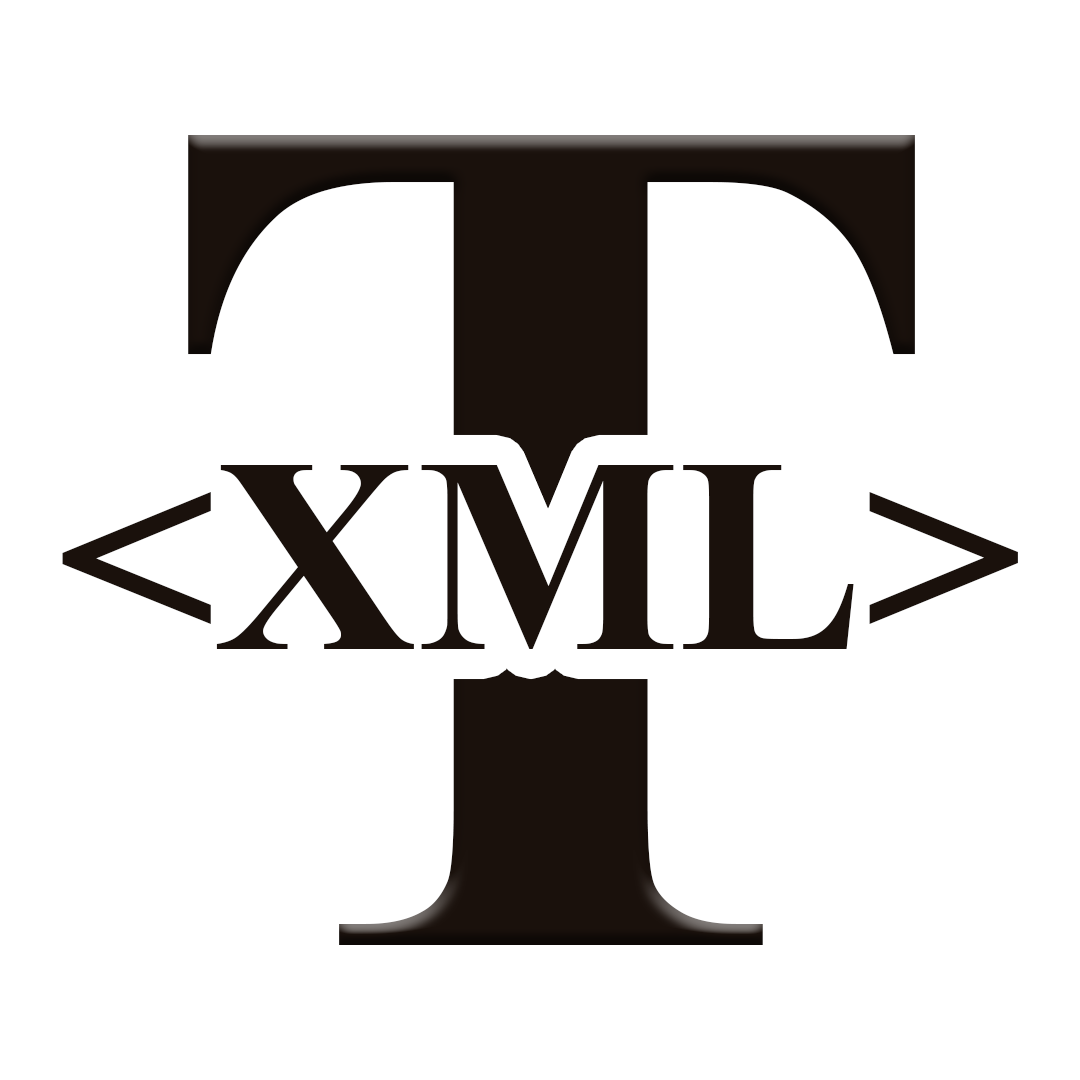
<style>
.page{position:relative;width:1080px;height:1080px;background:#ffffff}
.page>*{position:absolute;margin:0}
.t1{font:1222.2px "TimesNewRomanPS-BoldMT";color:#1a110c}
.t2{font:277.8px "TimesNewRomanPS-BoldMT";color:#1a110c}
</style>
<div class="page">
<p class="t1" style="left:188px;top:135px;width:727px;height:810px">T</p>
<p class="t2" style="left:62px;top:465px;width:956px;height:184px">&lt;XML&gt;</p>
</div>
